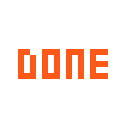
<style>
.page{position:relative;width:128px;height:128px;background:#ffffff}
.page>*{position:absolute;margin:0}
.t1{font:48px "04b24";color:#fc5817}
</style>
<div class="page">
<p class="t1" style="left:18px;top:49px;width:90px;height:30px">DONE</p>
</div>
